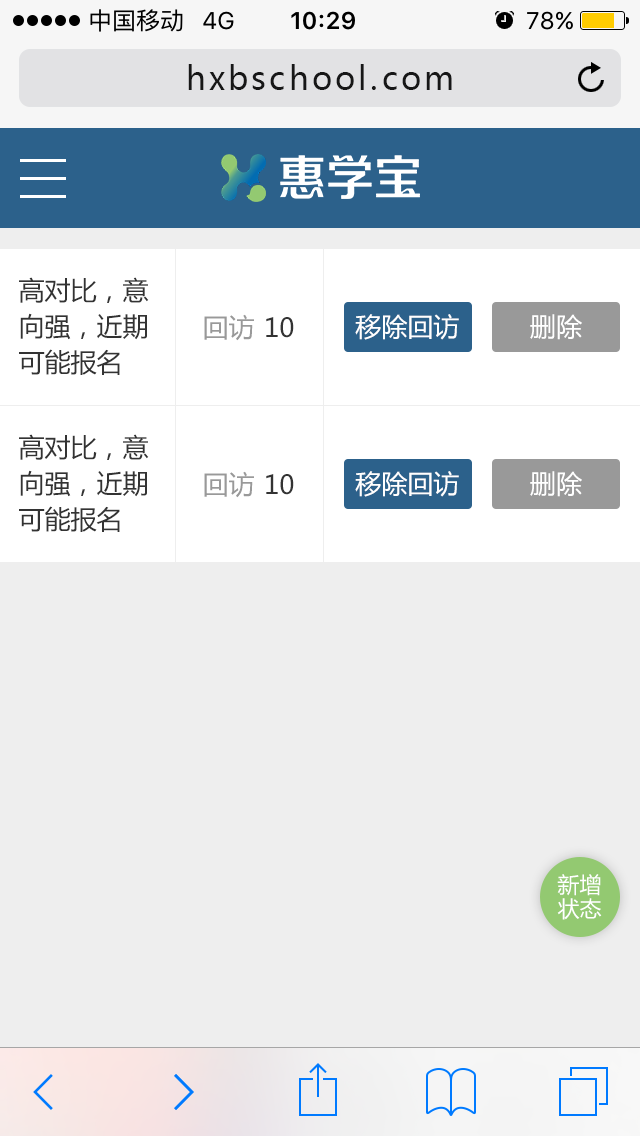
<style>
.page{position:relative;width:640px;height:1136px;background:#eeeeee}
.page>*{position:absolute;margin:0}
.t1{font:32px "MicrosoftYaHei";letter-spacing:0.1em;color:#171717}
.t2{font:26px/36px "MicrosoftYaHei";color:#333333}
.t3{font:26px "MicrosoftYaHei";color:#999999}
.t4{font:26px "MicrosoftYaHei";color:#333333}
.t5{font:26px "MicrosoftYaHei";color:#ffffff}
.t6{font:22px/24px "MicrosoftYaHei";color:#ffffff}
</style>
<div class="page">
<p class="t1" style="left:188px;top:64px;width:264px;height:26px">hxbschool.com</p>
<p class="t2" style="left:19px;top:277px;width:130px;height:98px">高对比，意<br>向强，近期<br>可能报名</p>
<p class="t3" style="left:204px;top:314px;width:50px;height:27px">回访</p>
<p class="t4" style="left:266px;top:317px;width:28px;height:21px">10</p>
<p class="t5" style="left:355px;top:314px;width:104px;height:26px">移除回访</p>
<p class="t5" style="left:530px;top:314px;width:52px;height:26px">删除</p>
<p class="t2" style="left:19px;top:434px;width:130px;height:98px">高对比，意<br>向强，近期<br>可能报名</p>
<p class="t3" style="left:204px;top:471px;width:50px;height:27px">回访</p>
<p class="t5" style="left:355px;top:471px;width:104px;height:26px">移除回访</p>
<p class="t5" style="left:530px;top:471px;width:52px;height:26px">删除</p>
<p class="t4" style="left:266px;top:474px;width:28px;height:21px">10</p>
<p class="t6" style="left:557px;top:874px;width:45px;height:46px">新增<br>状态</p>
</div>
